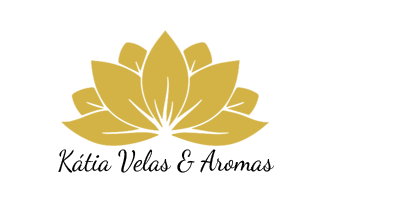
<style>
.page{position:relative;width:400px;height:217px;background:#ffffff}
.page>*{position:absolute;margin:0}
.t1{font:28.4px "DancingScript-Regular";color:#000000;scale:0.95 1}
.t2{font:23.7px "DancingScript-Regular";color:#cc00ff;scale:0.95 1}
</style>
<div class="page">
<p class="t1" style="left:58px;top:149px;width:216px;height:24px"><span class="t2">          <br>    <br></span>Kátia Velas &amp; Aromas</p>
</div>
